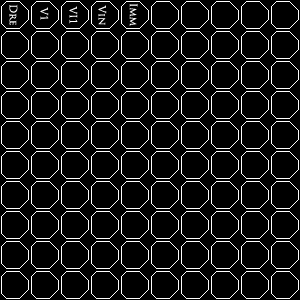
<style>
.page{position:relative;width:300px;height:300px;background:#000000}
.page>*{position:absolute;margin:0}
.t1{font:10px "TrajanPro-Regular";color:#ffffff}
</style>
<div class="page">
<p class="t1" style="left:9px;top:4px;width:9px;height:21px;rotate:90deg">Dre</p>
<p class="t1" style="left:69px;top:6px;width:9px;height:18px;rotate:89deg">VI1</p>
<p class="t1" style="left:98px;top:5px;width:9px;height:20px;rotate:89deg">Vin</p>
<p class="t1" style="left:129px;top:3px;width:9px;height:23px;rotate:90deg">Imm</p>
<p class="t1" style="left:40px;top:7px;width:9px;height:13px;rotate:89deg">V1</p>
</div>
